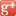
<style>
.page{position:relative;width:16px;height:16px}
.page>*{position:absolute;margin:0}
.t1{font:16px "Baskerville";letter-spacing:-0.05em;color:#ffffff;font-weight:bold}
.t2{font:12px "SIL-Hei-Med-Jian";letter-spacing:-0.05em;color:#ffffff;font-weight:bold}
</style>
<div class="page">
<p class="t1" style="left:1px;top:4px;width:8px;height:12px">g</p>
<p class="t2" style="left:9px;top:2px;width:7px;height:6px">+</p>
</div>
